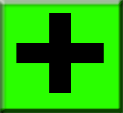
<style>
.page{position:relative;width:123px;height:113px;background:#2aff00}
.page>*{position:absolute;margin:0}
.t1{font:163.5px "Arial-BoldMT";color:#000000;scale:1.07 1}
</style>
<div class="page">
<p class="t1" style="left:16px;top:13px;width:88px;height:80px">+</p>
</div>
